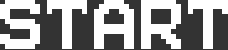
<style>
.page{position:relative;width:228px;height:50px;background:#333333}
.page>*{position:absolute;margin:0}
.t1{font:100px "Pixeboy";color:#ffffff}
</style>
<div class="page">
<p class="t1" style="left:0px;top:0px;width:228px;height:50px">START</p>
</div>
